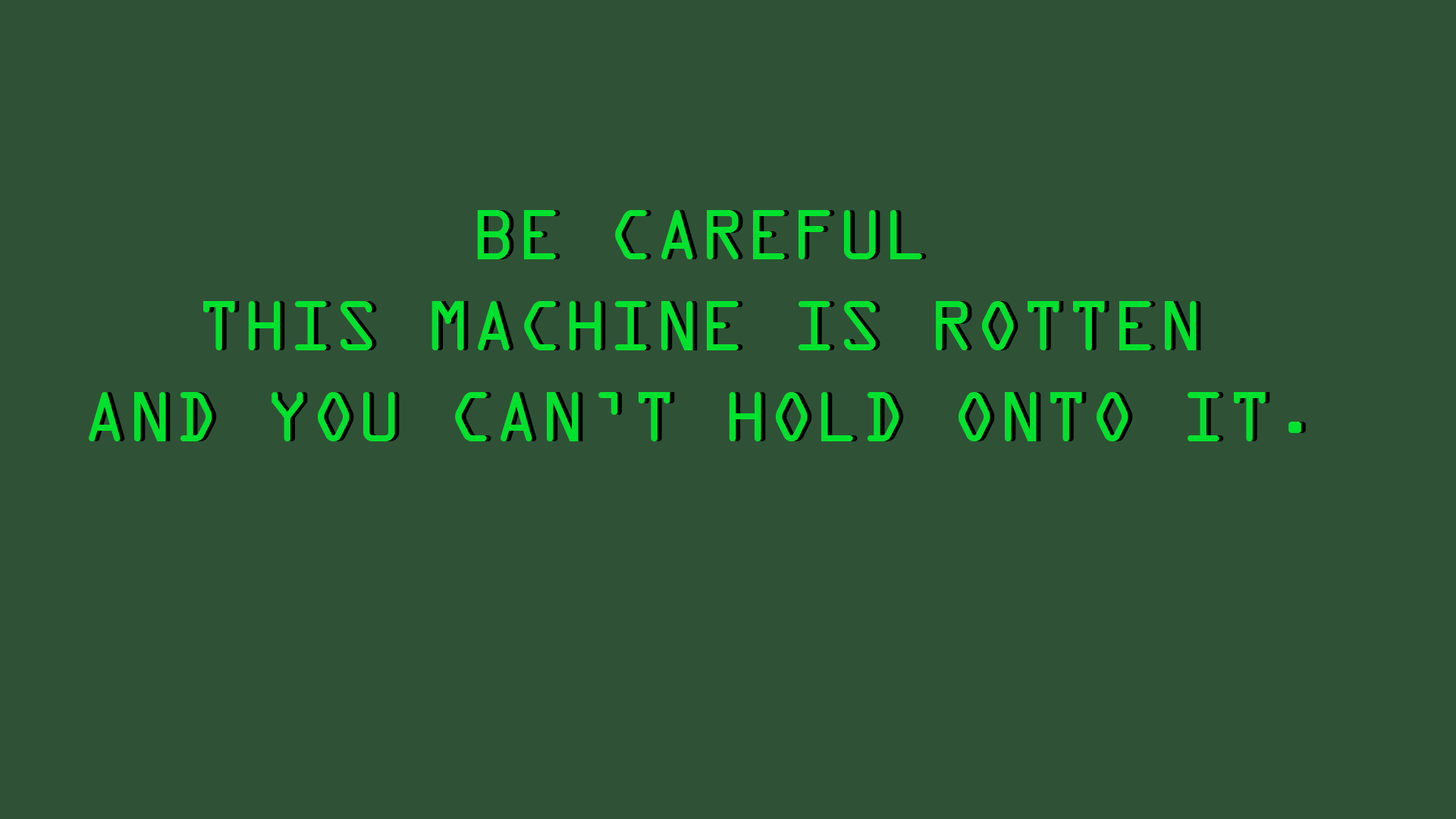
<style>
.page{position:relative;width:1456px;height:819px;background:#2f5236}
.page>*{position:absolute;margin:0}
.t1{font:75.8px "OCRAExtended";color:#00e22d}
.t2{font:75.8px "OCRAExtended"}
</style>
<div class="page">
<p class="t1" style="left:89px;top:210px;width:1212px;height:231px;text-align:center">BE CAREFUL<br> THIS MACHINE IS ROTTEN <br>AND YOU CAN’T HOLD ONTO IT.</p>
<p class="t2" style="left:93px;top:210px;width:1213px;height:231px;text-align:center">BE CAREFUL<br> THIS MACHINE IS ROTTEN <br>AND YOU CAN’T HOLD ONTO IT.</p>
</div>
